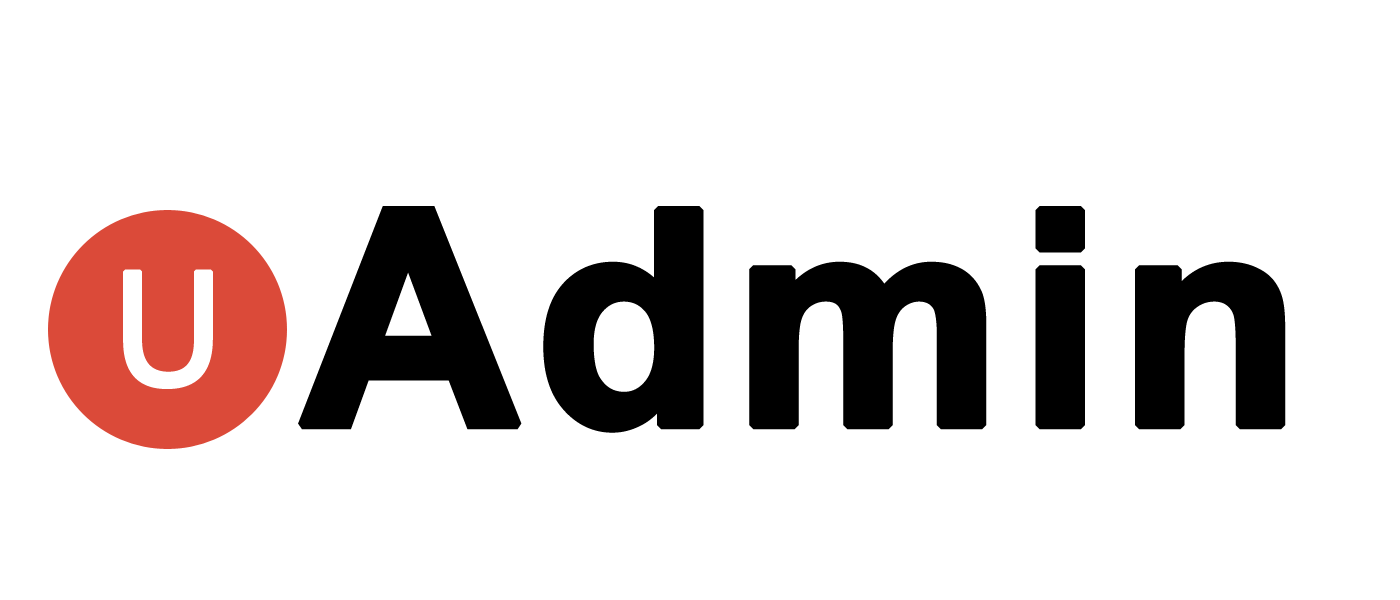
<style>
.page{position:relative;width:1400px;height:600px;background:#ffffff}
.page>*{position:absolute;margin:0}
.t1{font:300px "Arial-BoldMT";letter-spacing:0.028em;color:#000000;font-weight:bold}
.t2{font:150px "MicrosoftYaHei";letter-spacing:0.068em;color:#ffffff;font-weight:bold}
</style>
<div class="page">
<p class="t1" style="left:298px;top:206px;width:988px;height:227px">Admin</p>
<p class="t2" style="left:123px;top:269px;width:90px;height:120px">U</p>
</div>
